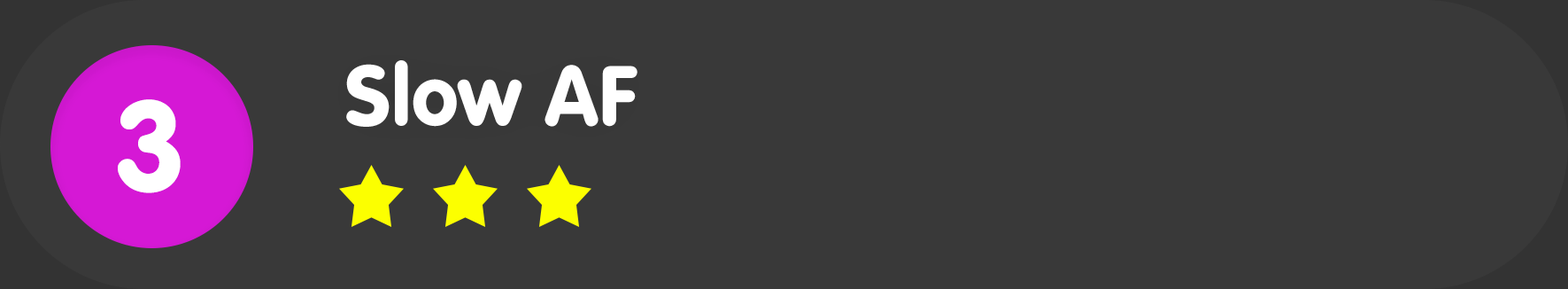
<style>
.page{position:relative;width:1568px;height:289px;background:#393939}
.page>*{position:absolute;margin:0}
.t1{font:88.5px "VAGRundschriftD";color:#ffffff}
.t2{font:132.8px "VAGRundschriftD";color:#ffffff}
</style>
<div class="page">
<p class="t1" style="left:346px;top:60px;width:291px;height:67px">Slow AF</p>
<p class="t2" style="left:118px;top:99px;width:63px;height:94px">3</p>
</div>
